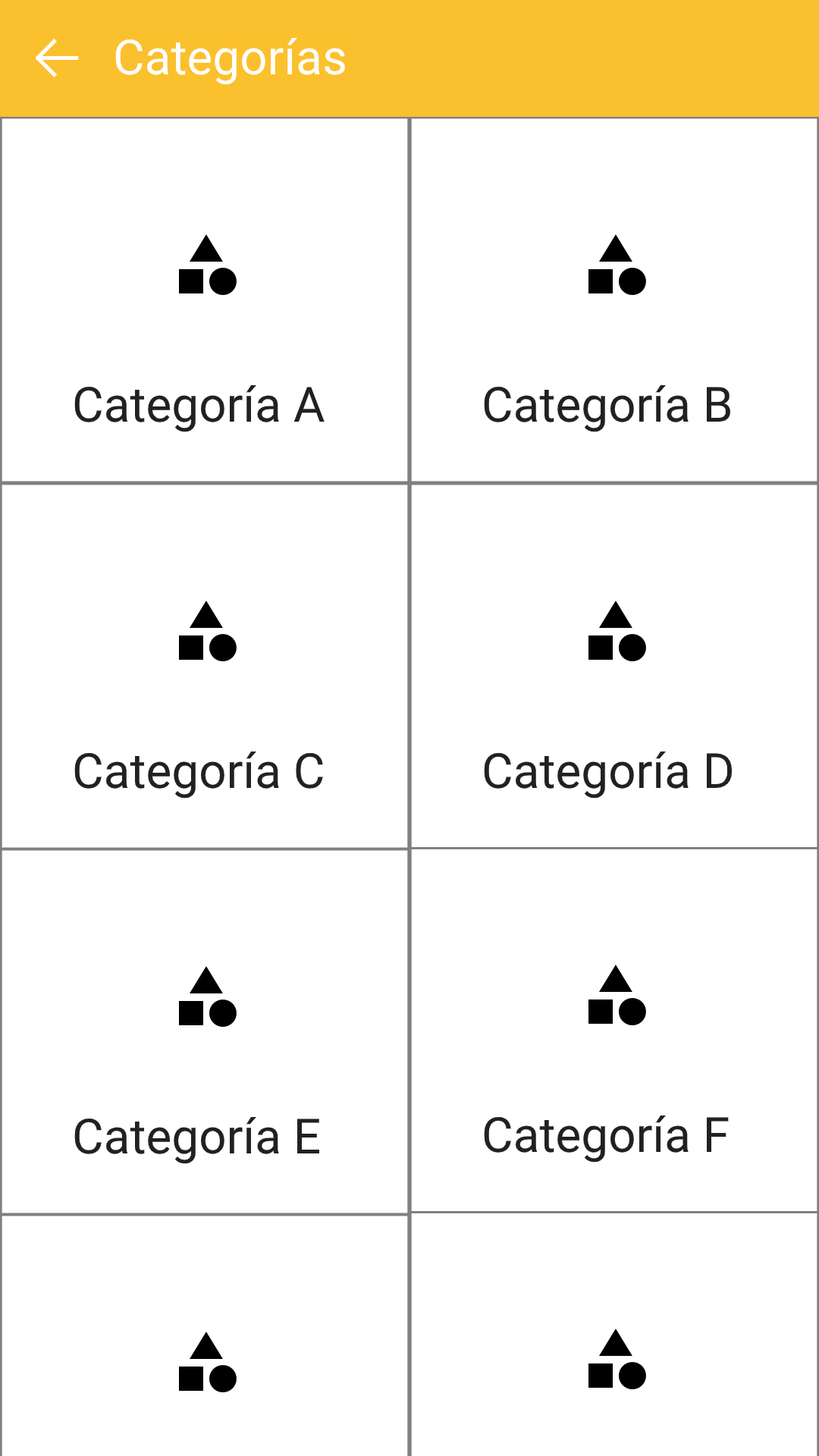
<style>
.page{position:relative;width:819px;height:1456px;background:#ffffff}
.page>*{position:absolute;margin:0}
.t1{font:48.5px "Roboto-Regular";color:#ffffff}
.t2{font:48.5px "Roboto-Regular";color:#212121}
</style>
<div class="page">
<p class="t1" style="left:115px;top:38px;width:230px;height:47px">Categorías</p>
<p class="t2" style="left:74px;top:385px;width:251px;height:47px">Categoría A</p>
<p class="t2" style="left:484px;top:385px;width:247px;height:47px">Categoría B</p>
<p class="t2" style="left:74px;top:751px;width:249px;height:48px">Categoría C</p>
<p class="t2" style="left:484px;top:751px;width:249px;height:48px">Categoría D</p>
<p class="t2" style="left:74px;top:1117px;width:246px;height:47px">Categoría E</p>
<p class="t2" style="left:484px;top:1115px;width:245px;height:48px">Categoría F</p>
</div>
